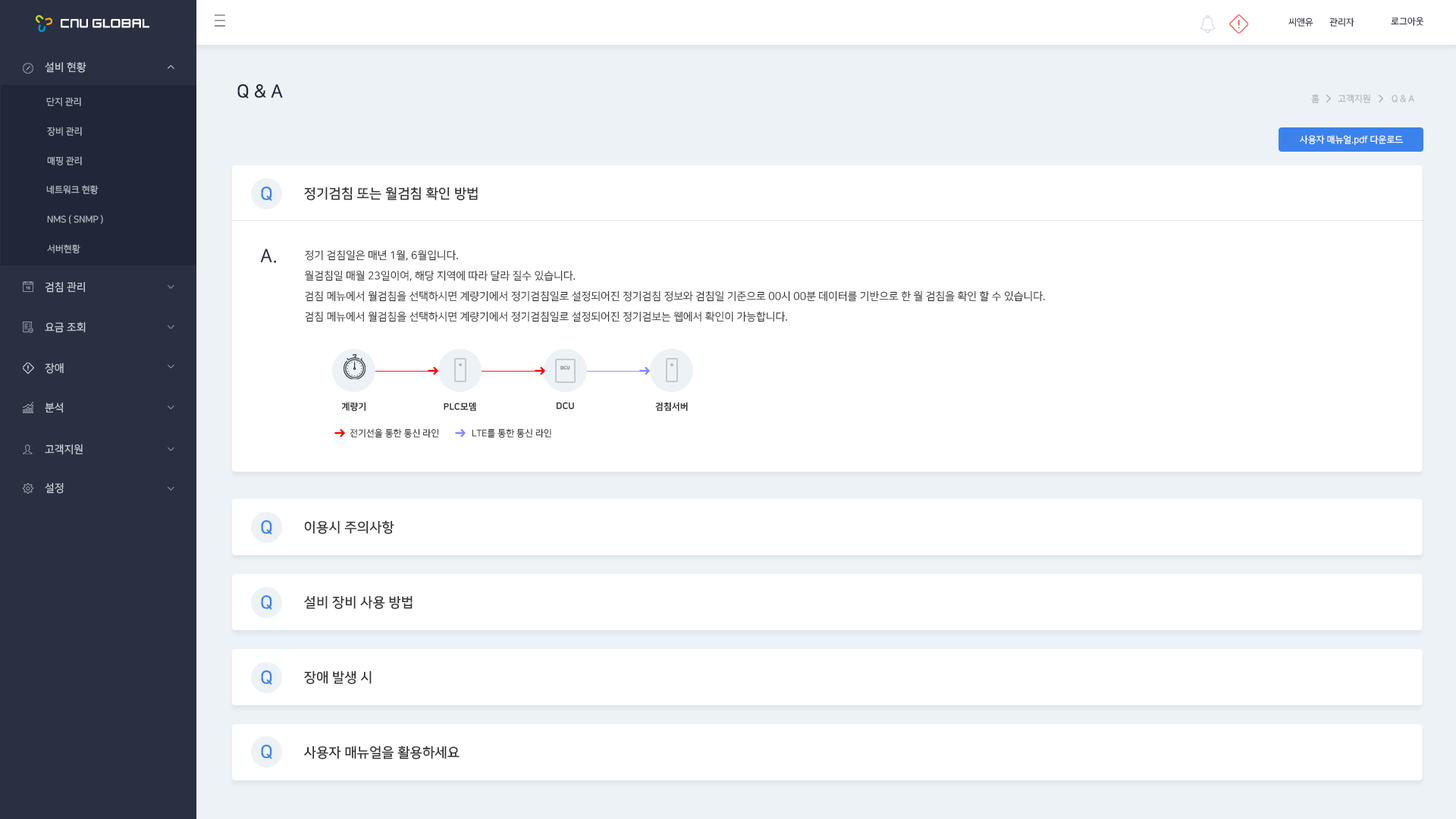
<style>
.page{position:relative;width:1456px;height:819px;background:#ffffff}
.page>*{position:absolute;margin:0}
.t1{font:9.1px "NanumSquareR"}
.t2{font:9.1px "NanumSquareR";color:#293042}
.t3{font:10.6px "NanumSquareR";color:#ced4da}
.t4{font:18.2px "NanumSquareB";color:#212738}
.t5{font:9.1px "NanumSquareR";color:#adb5bd}
.t6{font:9.1px "NanumSquareR";color:#aeb4bb}
.t7{font:9.1px "NanumSquareR";color:#ffffff}
.t8{font:18.2px "NanumSquareB";color:#3b82ec}
.t9{font:13.6px "NanumSquareB";color:#333333}
.t10{font:18.2px "NanumSquareB";color:#293042}
.t11{font:10.6px/20.5px "NanumSquareR";color:#333333}
.t12{font:4.5px "NanumSquareEB"}
.t13{font:9.1px "NanumSquareEB";color:#333333}
.t14{font:9.1px "NanumSquareR";color:#333333}
</style>
<div class="page">
<p class="t1" style="left:1288px;top:17px;width:25px;height:10px">씨앤유</p>
<p class="t2" style="left:1329px;top:17px;width:25px;height:10px">관리자</p>
<p class="t2" style="left:1391px;top:17px;width:33px;height:9px">로그아웃</p>
<p class="t3" style="left:45px;top:61px;width:41px;height:12px">설비 현황</p>
<p class="t4" style="left:237px;top:84px;width:46px;height:15px">Q &amp; A</p>
<p class="t5" style="left:46px;top:97px;width:35px;height:9px">단지 관리</p>
<p class="t6" style="left:1311px;top:94px;width:8px;height:9px">홈</p>
<p class="t6" style="left:1338px;top:94px;width:32px;height:9px">고객지원</p>
<p class="t6" style="left:1392px;top:95px;width:22px;height:7px">Q &amp; A</p>
<p class="t5" style="left:47px;top:127px;width:35px;height:9px">장비 관리</p>
<p class="t7" style="left:1300px;top:135px;width:103px;height:11px">사용자 매뉴얼.pdf 다운로드</p>
<p class="t5" style="left:47px;top:156px;width:35px;height:10px">매핑 관리</p>
<p class="t5" style="left:46px;top:185px;width:53px;height:10px">네트워크 현황</p>
<p class="t8" style="left:261px;top:187px;width:11px;height:14px">Q</p>
<p class="t9" style="left:304px;top:187px;width:174px;height:14px">정기검침 또는 월검침 확인 방법</p>
<p class="t5" style="left:47px;top:215px;width:56px;height:9px">NMS ( SNMP )</p>
<p class="t5" style="left:47px;top:244px;width:33px;height:10px">서버현황</p>
<p class="t10" style="left:260px;top:249px;width:16px;height:14px">A.</p>
<p class="t11" style="left:305px;top:249px;width:740px;height:73px">정기 검침일은 매년 1월, 6월입니다.<br>월검침일 매월 23일이여, 해당 지역에 따라 달라 질수 있습니다.<br>검침 메뉴에서 월검침을 선택하시면 계량기에서 정기검침일로 설정되어진 정기검침 정보와 검침일 기준으로 00시 00분 데이터를 기반으로 한 월 검침을 확인 할 수 있습니다.<br>검침 메뉴에서 월검침을 선택하시면 계량기에서 정기검침일로 설정되어진 정기검보는 웹에서 확인이 가능합니다.</p>
<p class="t3" style="left:45px;top:281px;width:40px;height:12px">검침 관리</p>
<p class="t3" style="left:45px;top:322px;width:41px;height:11px">요금 조회</p>
<p class="t3" style="left:45px;top:362px;width:19px;height:12px">장애</p>
<p class="t12" style="left:560px;top:366px;width:10px;height:4px">DCU</p>
<p class="t3" style="left:45px;top:402px;width:18px;height:11px">분석</p>
<p class="t13" style="left:341px;top:402px;width:25px;height:10px">계량기</p>
<p class="t13" style="left:444px;top:402px;width:32px;height:9px">PLC모뎀</p>
<p class="t13" style="left:556px;top:402px;width:18px;height:7px">DCU</p>
<p class="t13" style="left:655px;top:402px;width:33px;height:9px">검침서버</p>
<p class="t14" style="left:350px;top:428px;width:89px;height:10px">전기선을 통한 통신 라인</p>
<p class="t14" style="left:472px;top:428px;width:79px;height:10px">LTE를 통한 통신 라인</p>
<p class="t3" style="left:45px;top:444px;width:38px;height:11px">고객지원</p>
<p class="t3" style="left:45px;top:482px;width:19px;height:12px">설정</p>
<p class="t8" style="left:261px;top:520px;width:11px;height:15px">Q</p>
<p class="t9" style="left:304px;top:520px;width:90px;height:15px">이용시 주의사항</p>
<p class="t8" style="left:261px;top:595px;width:11px;height:15px">Q</p>
<p class="t9" style="left:304px;top:595px;width:109px;height:15px">설비 장비 사용 방법</p>
<p class="t8" style="left:261px;top:670px;width:11px;height:15px">Q</p>
<p class="t9" style="left:304px;top:670px;width:68px;height:15px">장애 발생 시</p>
<p class="t8" style="left:261px;top:745px;width:11px;height:14px">Q</p>
<p class="t9" style="left:304px;top:745px;width:156px;height:15px">사용자 매뉴얼을 활용하세요</p>
</div>
